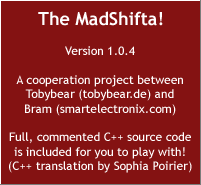
<style>
.page{position:relative;width:201px;height:185px;background:#841212}
.page>*{position:absolute;margin:0}
.t1{font:18px "TrebuchetMS-Bold";color:#ffffff}
.t2{font:12px "TrebuchetMS";color:#ffffff}
</style>
<div class="page">
<p class="t1" style="left:38px;top:11px;width:125px;height:15px">The MadShifta!</p>
<p class="t2" style="left:9px;top:46px;width:183px;height:127px;text-align:center">Version 1.0.4<br><br>A cooperation project between<br>Tobybear (tobybear.de) and<br>Bram (smartelectronix.com)<br><br>Full, commented C++ source code<br>is included for you to play with!<br>(C++ translation by Sophia Poirier)</p>
</div>
